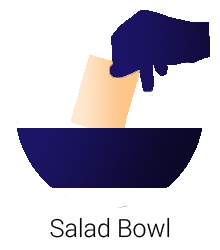
<style>
.page{position:relative;width:220px;height:250px;background:#ffffff}
.page>*{position:absolute;margin:0}
.t1{font:25px "Roboto-Light";color:#000000}
</style>
<div class="page">
<p class="t1" style="left:50px;top:217px;width:120px;height:21px">Salad Bowl</p>
</div>
